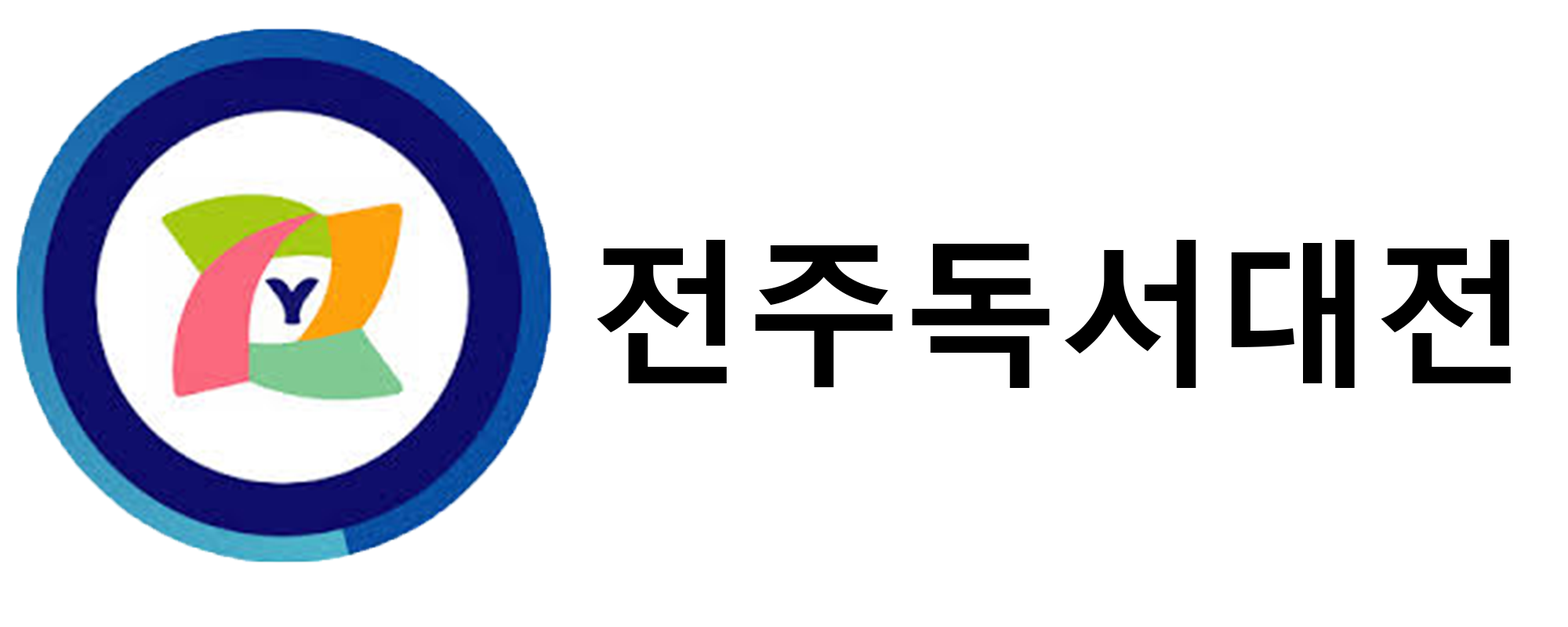
<style>
.page{position:relative;width:1568px;height:627px;background:#ffffff}
.page>*{position:absolute;margin:0}
.t1{font:156.8px "MalgunGothicBold";color:#000000}
</style>
<div class="page">
<p class="t1" style="left:597px;top:240px;width:914px;height:148px">전주독서대전</p>
</div>
